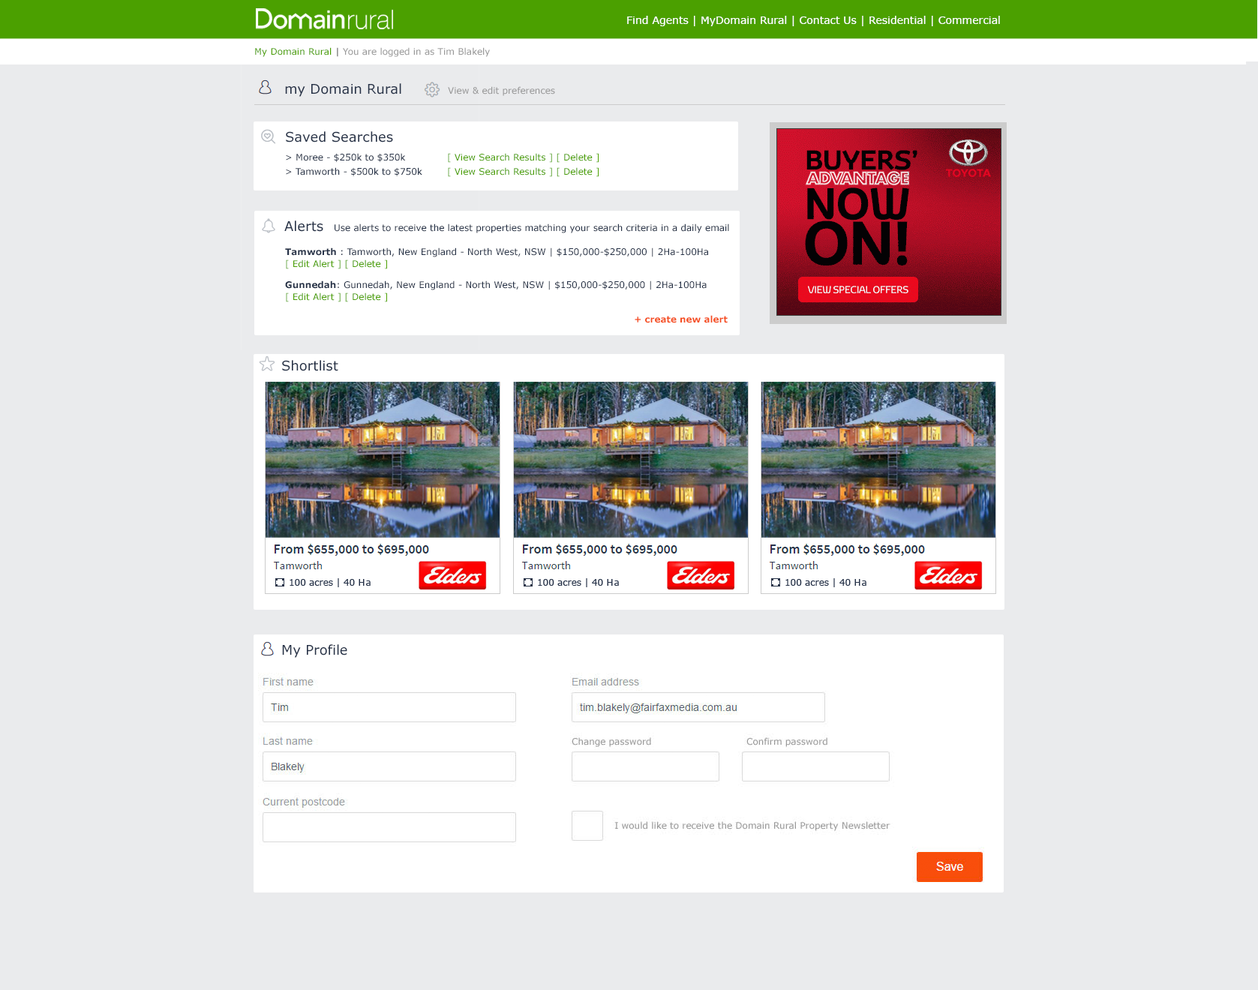
<style>
.page{position:relative;width:1258px;height:990px;background:#eaebed}
.page>*{position:absolute;margin:0}
.t1{font:10.5px "Verdana";color:#ffffff}
.t2{font:9px "Verdana";color:#999999}
.t3{font:9px "Verdana";color:#4ba000}
.t4{font:9px "Verdana-Bold";color:#999999}
.t5{font:13.5px "Verdana";color:#263248}
.t6{font:9px "Verdana";color:#263248}
.t7{font:9px/12px "Verdana";color:#263248}
.t8{font:9px/12px "Verdana-Bold";color:#263248}
.t9{font:9px/12px "Verdana";color:#4ba000}
.t10{font:9px "Verdana-Bold";color:#f54f21}
</style>
<div class="page">
<p class="t1" style="left:627px;top:16px;width:373px;height:10px">Find Agents | MyDomain Rural | Contact Us | Residential | Commercial</p>
<p class="t2" style="left:255px;top:47px;width:235px;height:10px"><span class="t3">My Domain Rural </span><span class="t4">| </span>You are logged in as Tim Blakely</p>
<p class="t5" style="left:285px;top:83px;width:116px;height:14px">my Domain Rural</p>
<p class="t2" style="left:448px;top:86px;width:107px;height:10px">View &amp; edit preferences</p>
<p class="t5" style="left:286px;top:131px;width:107px;height:11px">Saved Searches</p>
<p class="t3" style="left:286px;top:153px;width:312px;height:10px"><span class="t6">&gt; Moree - $250k to $350k     </span>[ View Search Results ] [ Delete ]</p>
<p class="t3" style="left:286px;top:167px;width:312px;height:10px"><span class="t6">&gt; Tamworth - $500k to $750k   </span>[ View Search Results ] [ Delete ]</p>
<p class="t5" style="left:284px;top:220px;width:39px;height:12px">Alerts</p>
<p class="t6" style="left:334px;top:224px;width:395px;height:9px">Use alerts to receive the latest properties matching your search criteria in a daily email</p>
<p class="t7" style="left:285px;top:248px;width:423px;height:21px"><span class="t8">Tamworth </span>: Tamworth, New England - North West, NSW | $150,000-$250,000 | 2Ha-100Ha <br><span class="t9">[ Edit Alert ] [ Delete ]</span></p>
<p class="t7" style="left:285px;top:280px;width:421px;height:22px"><span class="t8">Gunnedah</span>: Gunnedah, New England - North West, NSW | $150,000-$250,000 | 2Ha-100Ha <br><span class="t9">[ Edit Alert ] [ Delete ]</span></p>
<p class="t10" style="left:634px;top:315px;width:94px;height:8px">+ create new alert</p>
<p class="t5" style="left:282px;top:360px;width:56px;height:11px">Shortlist</p>
<p class="t5" style="left:282px;top:644px;width:65px;height:14px">My Profile</p>
</div>
